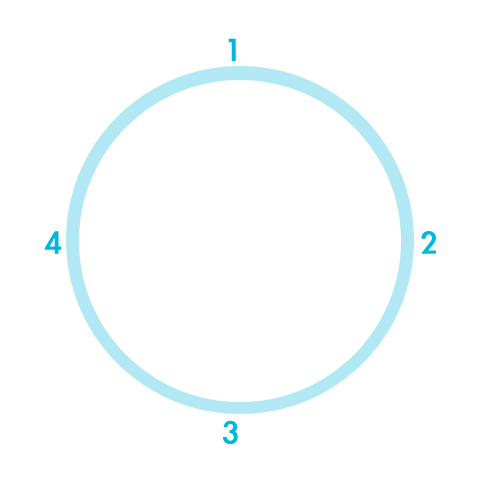
<style>
.page{position:relative;width:480px;height:481px;background:#ffffff}
.page>*{position:absolute;margin:0}
.t1{font:36.2px "LiGothicMed";color:#00b7dc}
</style>
<div class="page">
<p class="t1" style="left:228px;top:38px;width:8px;height:23px">1</p>
<p class="t1" style="left:44px;top:231px;width:18px;height:23px">4</p>
<p class="t1" style="left:421px;top:231px;width:15px;height:23px">2</p>
<p class="t1" style="left:223px;top:420px;width:15px;height:24px">3</p>
</div>
